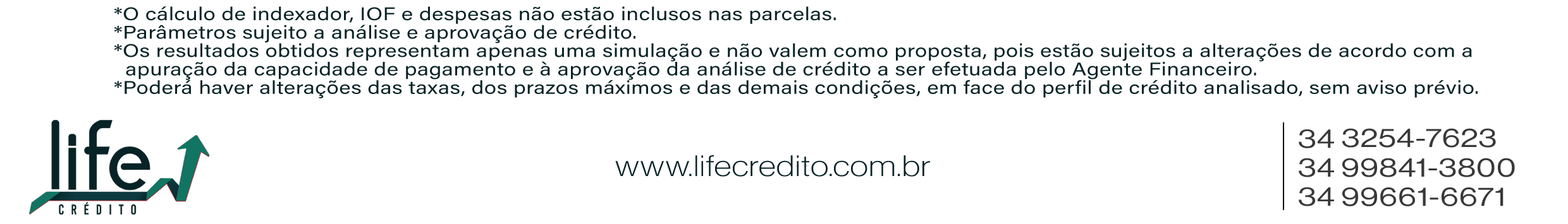
<style>
.page{position:relative;width:1568px;height:224px;background:#ffffff}
.page>*{position:absolute;margin:0}
.t1{font:18.4px/18.4px "AcuminPro-Regular";letter-spacing:0.009em;color:#082326;scale:1.2 1}
.t2{font:29px "NeueHaasDisplay-Thin";letter-spacing:0.02em;color:#082326;scale:1.2 1}
</style>
<div class="page">
<p class="t1" style="left:114px;top:6px;width:1364px;height:93px">*O cálculo de indexador, IOF e despesas não estão inclusos nas parcelas.<br>*Parâmetros sujeito a análise e aprovação de crédito.<br>*Os resultados obtidos representam apenas uma simulação e não valem como proposta, pois estão sujeitos a alterações de acordo com a <br>  apuração da capacidade de pagamento e à aprovação da análise de crédito a ser efetuada pelo Agente Financeiro.<br>*Poderá haver alterações das taxas, dos prazos máximos e das demais condições, em face do perfil de crédito analisado, sem aviso prévio.</p>
<p class="t2" style="left:615px;top:156px;width:315px;height:21px">www.lifecredito.com.br</p>
</div>
